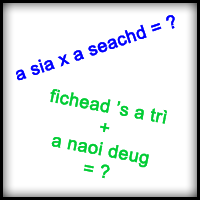
<style>
.page{position:relative;width:200px;height:200px;background:#ffffff}
.page>*{position:absolute;margin:0}
.t1{font:18px "ArialMT";color:#0000ff;font-weight:bold}
.t2{font:18px "ArialMT";color:#00cc33;font-weight:bold}
</style>
<div class="page">
<p class="t1" style="left:16px;top:15px;width:159px;height:66px;rotate:-19deg">a sia x a seachd = ?</p>
<p class="t2" style="left:50px;top:89px;width:117px;height:90px;text-align:center;rotate:11deg">fichead ’s a trì<br>+<br>a naoi deug<br>= ?</p>
</div>
